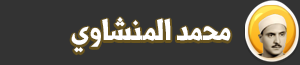
<style>
.page{position:relative;width:300px;height:65px;background:#333333}
.page>*{position:absolute;margin:0}
.t1{font:36px "Shorooq_N1";color:#ffffff}
</style>
<div class="page">
<p class="t1" style="left:71px;top:17px;width:160px;height:36px">محمد المنشاوي</p>
</div>
